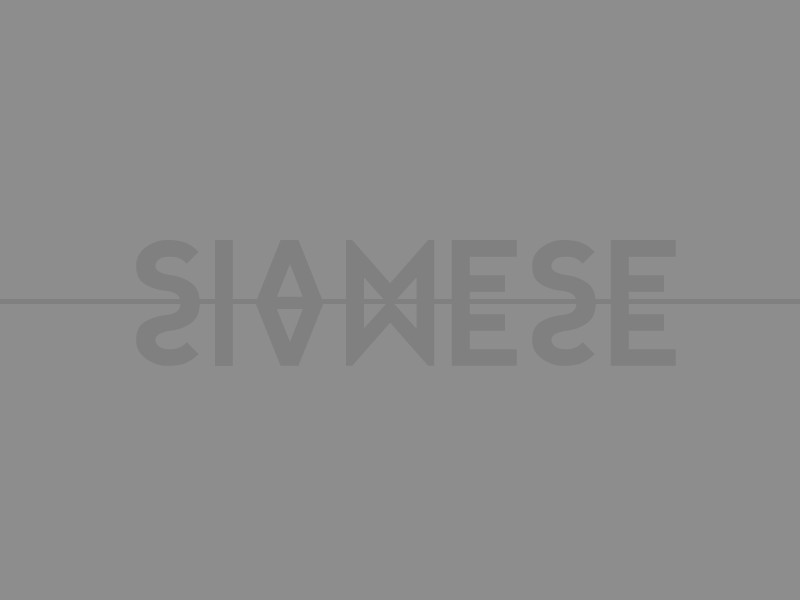
<style>
.page{position:relative;width:800px;height:600px;background:#8e8d8d}
.page>*{position:absolute;margin:0}
.t1{font:119.9px "nevis-Bold";color:#808080;text-transform:uppercase}
</style>
<div class="page">
<p class="t1" style="left:132px;top:240px;width:544px;height:88px">SIAMESE</p>
<p class="t1" style="left:132px;top:278px;width:544px;height:88px">SIAMESE</p>
</div>
